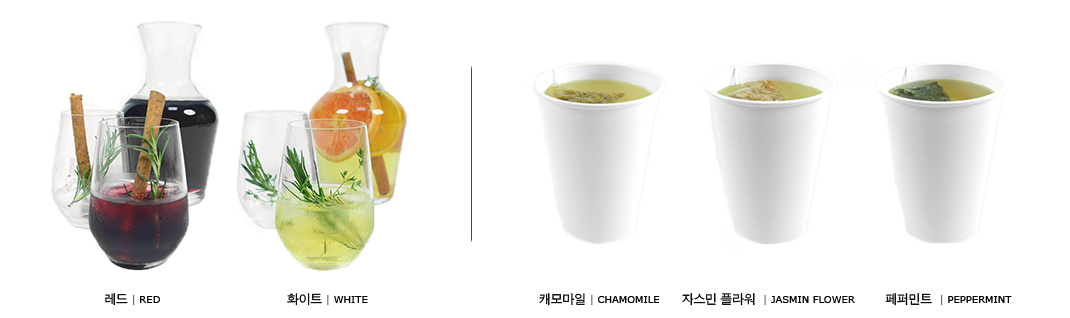
<style>
.page{position:relative;width:1070px;height:318px;background:#ffffff}
.page>*{position:absolute;margin:0}
.t1{font:10px "Verdana";color:#000000}
.t2{font:13px "SandJg";color:#000000}
.t3{font:10px "Verdana";color:#666666}
</style>
<div class="page">
<p class="t1" style="left:105px;top:293px;width:55px;height:13px"><span class="t2">레드 </span><span class="t3">|</span> RED</p>
<p class="t1" style="left:287px;top:293px;width:81px;height:13px"><span class="t2">화이트 </span><span class="t3">|</span> WHITE</p>
<p class="t1" style="left:539px;top:293px;width:121px;height:13px"><span class="t2">캐모마일 </span><span class="t3">|</span> CHAMOMILE</p>
<p class="t1" style="left:682px;top:293px;width:173px;height:13px"><span class="t2">자스민 플라워  </span><span class="t3">|</span> JASMIN FLOWER</p>
<p class="t1" style="left:885px;top:293px;width:127px;height:13px"><span class="t2">페퍼민트  </span><span class="t3">|</span> PEPPERMINT</p>
</div>
